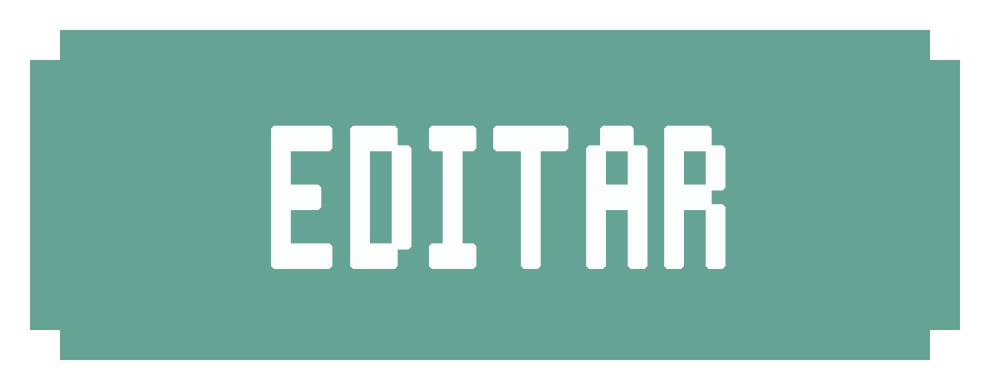
<style>
.page{position:relative;width:990px;height:390px;background:#65a394}
.page>*{position:absolute;margin:0}
.t1{font:255px "Pixelade";letter-spacing:0.025em;color:#fcfefe;font-weight:bold;scale:0.71 1}
</style>
<div class="page">
<p class="t1" style="left:271px;top:125px;width:455px;height:144px">EDITAR</p>
</div>
